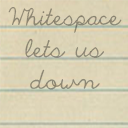
<style>
.page{position:relative;width:128px;height:128px}
.page>*{position:absolute;margin:0}
.t1{font:22.6px/32px "TheOnlyException";color:#8c8673}
.t2{font:22.1px/32px "TheOnlyException";color:#8c8673}
</style>
<div class="page">
<p class="t1" style="left:8px;top:7px;width:114px;height:83px;text-align:center"><span class="t2">Whitespace</span> lets us down</p>
</div>
